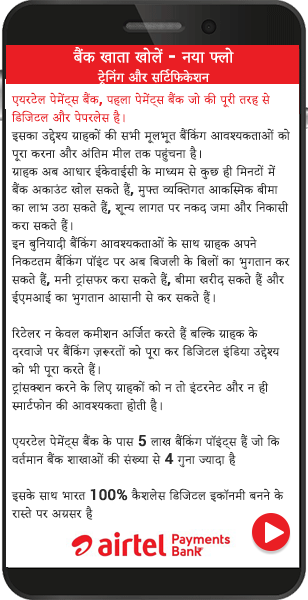
<style>
.page{position:relative;width:308px;height:600px;background:#ffffff}
.page>*{position:absolute;margin:0}
.t1{font:16px "AdobeDevanagari-Regular";color:#ffffff;font-weight:bold}
.t2{font:20px "AdobeDevanagari-Regular";color:#ffffff;font-weight:bold}
.t3{font:20px "Roboto-Bold";color:#ffffff;font-weight:bold}
.t4{font:15px "AdobeDevanagari-Regular";color:#2b2b2b;font-weight:bold}
.t5{font:15px "AdobeDevanagari-Regular";color:#ea1e24;font-weight:bold}
.t6{font:15px "Roboto-Medium";color:#ea1e24;font-weight:bold}
.t7{font:15px "Roboto-Medium";color:#2b2b2b;font-weight:bold}
</style>
<div class="page">
<p class="t1" style="left:73px;top:47px;width:161px;height:38px;text-align:center"><span class="t2">बैंक खाता खोलें</span><span class="t3"> - </span><span class="t2">नया फ्लो <br></span>ट्रेनिंग और सर्टिफिकेशन</p>
<p class="t4" style="left:11px;top:92px;width:279px;height:428px"><span class="t5">एयरटेल पेमेंट्स बैंक</span><span class="t6">, </span><span class="t5">पहला पेमेंट्स बैंक जो की पूरी तरह से डिजिटल और पेपरलेस है। <br></span>इसका उद्देश्य ग्राहकों की सभी मूलभूत बैंकिंग आवश्यकताओं को पूरा करना और अंतिम मील तक पहुंचना है।<br>ग्राहक अब आधार ईकेवाईसी के माध्यम से कुछ ही मिनटों में बैंक अकाउंट खोल सकते हैं<span class="t7">, </span>मुफ्त व्यक्तिगत आकस्मिक बीमा का लाभ उठा सकते हैं<span class="t7">, </span>शून्य लागत पर नकद जमा और निकासी करा सकते हैं। <br>इन बुनियादी बैंकिंग आवश्यकताओं के साथ ग्राहक अपने निकटतम बैंकिंग पॉइंट पर अब बिजली के बिलों का भुगतान कर सकते हैं<span class="t7">, </span>मनी ट्रांसफर करा सकते हैं<span class="t7">, </span>बीमा खरीद सकते हैं और ईएमआई का भुगतान आसानी से कर सकते हैं।<br><br>रिटेलर न केवल कमीशन अर्जित करते हैं बल्कि ग्राहक के दरवाजे पर बैंकिंग ज़रूरतों को पूरा कर डिजिटल इंडिया उद्देश्य को भी पूरा करते हैं।<br>ट्रांसक्शन करने के लिए ग्राहकों को न तो इंटरनेट और न ही स्मार्टफोन की आवश्यकता होती है।<br><br>एयरटेल पेमेंट्स बैंक के पास<span class="t7"> 5 </span>लाख बैंकिंग पॉइंट्स हैं जो कि वर्तमान बैंक शाखाओं की संख्या से<span class="t7"> 4 </span>गुना ज्यादा है<br><br>इसके साथ भारत<span class="t7"> 100% </span>कैशलेस डिजिटल इकॉनमी बनने के रास्ते पर अग्रसर है</p>
</div>
